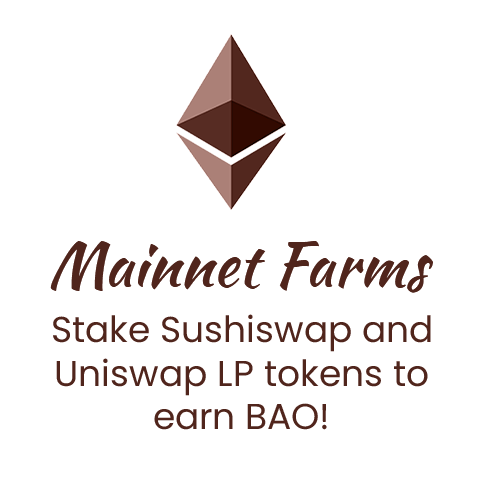
<style>
.page{position:relative;width:484px;height:484px;background:#ffffff}
.page>*{position:absolute;margin:0}
.t1{font:61.1px "KaushanScript-Regular";color:#50251c}
.t2{font:36px "Poppins-Regular";color:#50251c}
</style>
<div class="page">
<p class="t1" style="left:50px;top:241px;width:383px;height:52px">Mainnet Farms</p>
<p class="t2" style="left:53px;top:314px;width:378px;height:116px;text-align:center">Stake Sushiswap and Uniswap LP tokens to earn BAO!</p>
</div>
